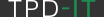
<style>
.page{position:relative;width:104px;height:17px;background:#333333}
.page>*{position:absolute;margin:0}
.t1{font:22.4px "Helvetica-Light";letter-spacing:0.08em;color:#ffffff;scale:1.11 1}
.t2{font:22.4px "Helvetica-Light";letter-spacing:0.08em;color:#1b8d4e;font-weight:bold;scale:1.11 1}
</style>
<div class="page">
<p class="t1" style="left:8px;top:0px;width:50px;height:17px">TPD</p>
<p class="t2" style="left:74px;top:0px;width:22px;height:18px">IT</p>
<p class="t2" style="left:62px;top:7px;width:8px;height:3px">-</p>
</div>
